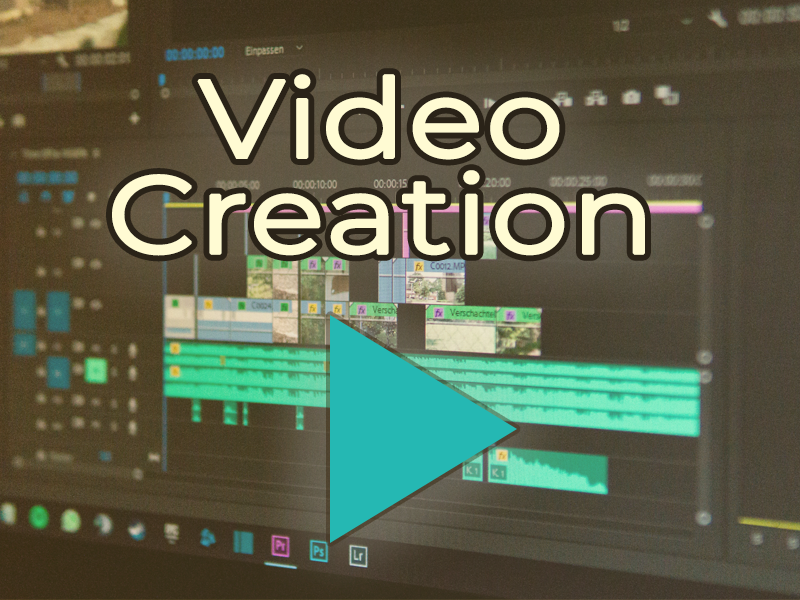
<style>
.page{position:relative;width:800px;height:600px}
.page>*{position:absolute;margin:0}
.t1{font:109.4px/95.8px "Montserrat-Regular";color:#fffbd3;font-weight:bold;scale:1.12 1}
</style>
<div class="page">
<p class="t1" style="left:112px;top:74px;width:533px;height:182px;text-align:center">Video<br>Creation</p>
</div>
